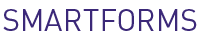
<style>
.page{position:relative;width:200px;height:40px;background:#ffffff}
.page>*{position:absolute;margin:0}
.t1{font:30px "DINPro-Regular";letter-spacing:0.005em;color:#3b2878}
</style>
<div class="page">
<p class="t1" style="left:3px;top:9px;width:194px;height:22px">SMARTFORMS</p>
</div>
